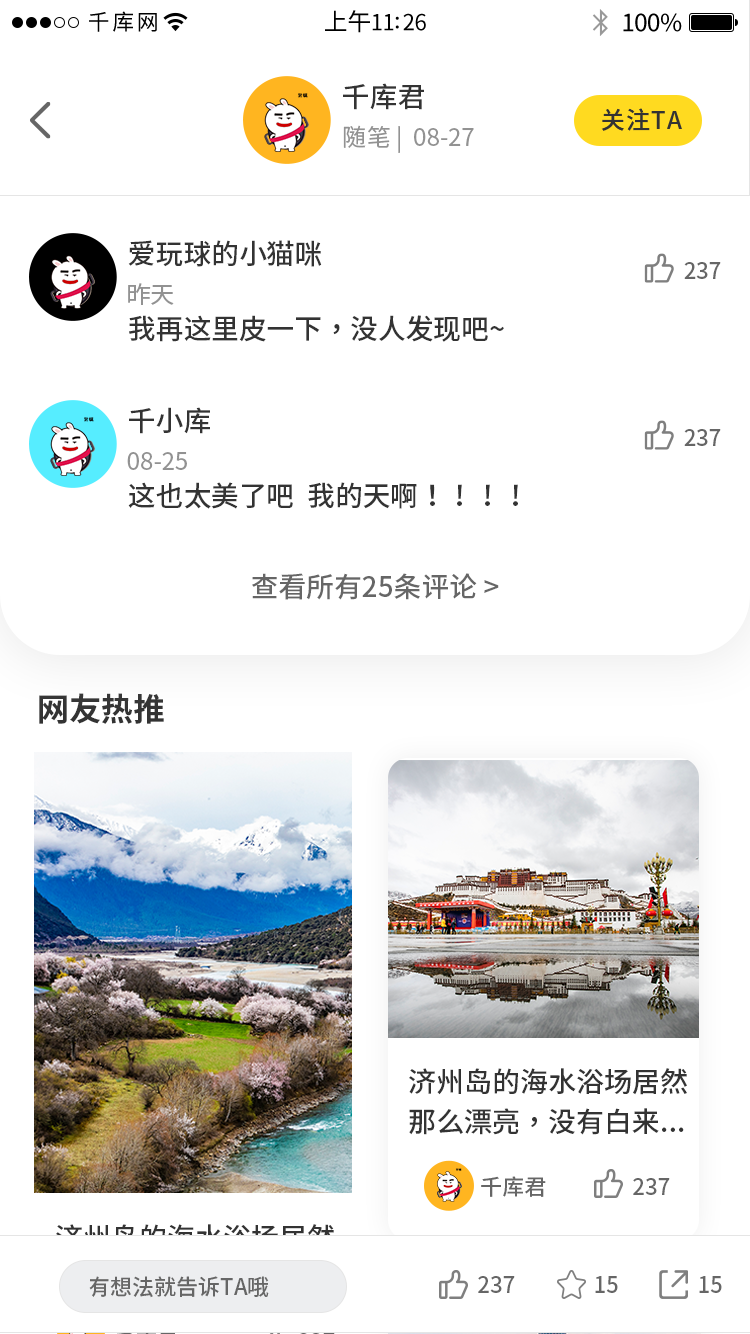
<style>
.page{position:relative;width:750px;height:1334px;background:#ffffff}
.page>*{position:absolute;margin:0}
.t1{font:27.8px "SourceHanSansSC-Medium";color:#333333}
.t2{font:24px "SourceHanSansSC-Medium";letter-spacing:0.05em;color:#333333}
.t3{font:24px "SourceHanSansSC-Regular";color:#929292}
.t4{font:22px "SourceHanSansSC-Medium";color:#666666}
.t5{font:27.8px "SourceHanSansSC-Medium";color:#666666}
.t6{font:32px "SourceHanSansSC-Bold";color:#333333}
.t7{font:28px/40px "SourceHanSansSC-Medium";color:#333333}
.t8{font:28px/40px "SourceHanSansSC-Medium"}
</style>
<div class="page">
<p class="t1" style="left:343px;top:83px;width:81px;height:27px">千库君</p>
<p class="t2" style="left:601px;top:108px;width:81px;height:23px">关注TA</p>
<p class="t3" style="left:343px;top:125px;width:131px;height:28px">随笔 |  08-27</p>
<p class="t1" style="left:128px;top:240px;width:194px;height:27px">爱玩球的小猫咪</p>
<p class="t4" style="left:684px;top:262px;width:37px;height:17px">237</p>
<p class="t3" style="left:128px;top:283px;width:46px;height:22px">昨天</p>
<p class="t1" style="left:129px;top:315px;width:375px;height:27px">我再这里皮一下，没人发现吧~</p>
<p class="t1" style="left:129px;top:407px;width:81px;height:27px">千小库</p>
<p class="t4" style="left:684px;top:429px;width:37px;height:17px">237</p>
<p class="t3" style="left:127px;top:452px;width:60px;height:18px">08-25</p>
<p class="t1" style="left:128px;top:482px;width:390px;height:27px">这也太美了吧  我的天啊！！！！</p>
<p class="t5" style="left:252px;top:573px;width:247px;height:27px">查看所有25条评论 &gt;</p>
<p class="t6" style="left:39px;top:693px;width:125px;height:31px">网友热推</p>
<p class="t7" style="left:409px;top:1068px;width:278px;height:67px">济州岛的海水浴场居然<br>那么漂亮，没有白来...</p>
<p class="t4" style="left:481px;top:1176px;width:65px;height:21px">千库君</p>
<p class="t4" style="left:633px;top:1178px;width:37px;height:17px">237</p>
<p class="t8" style="left:56px;top:1224px;width:278px;height:67px">济州岛的海水浴场居然<br>那么漂亮，没有白来...</p>
<p class="t4" style="left:89px;top:1276px;width:180px;height:22px">有想法就告诉TA哦</p>
<p class="t4" style="left:478px;top:1276px;width:37px;height:17px">237</p>
<p class="t4" style="left:595px;top:1276px;width:23px;height:17px">15</p>
<p class="t4" style="left:699px;top:1276px;width:23px;height:17px">15</p>
</div>
